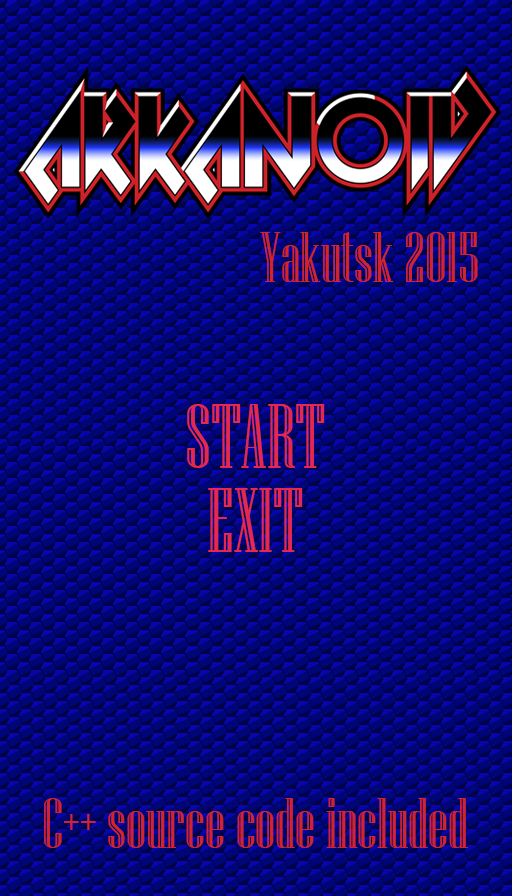
<style>
.page{position:relative;width:512px;height:896px;background:#000578}
.page>*{position:absolute;margin:0}
.t1{font:72px "NiagaraEngraved-Reg";color:#d4232a}
.t2{font:92px "NiagaraEngraved-Reg";color:#e7284e}
</style>
<div class="page">
<p class="t1" style="left:260px;top:232px;width:218px;height:50px">Yakutsk 2015</p>
<p class="t2" style="left:187px;top:404px;width:138px;height:64px">START</p>
<p class="t2" style="left:208px;top:488px;width:95px;height:64px">EXIT</p>
<p class="t1" style="left:44px;top:798px;width:424px;height:50px">C++ source code included</p>
</div>
